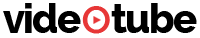
<style>
.page{position:relative;width:200px;height:38px;background:#ffffff}
.page>*{position:absolute;margin:0}
.t1{font:40px "Raleway-ExtraBold";letter-spacing:-0.04em;color:#000000}
.t2{font:40px "Raleway-ExtraBold";color:#000000}
.t3{font:51px "Raleway-Medium";letter-spacing:-0.02em;color:#e73737}
</style>
<div class="page">
<p class="t1" style="left:3px;top:3px;width:194px;height:31px">vid<span class="t2">e</span><span class="t3">o</span>tube</p>
</div>
